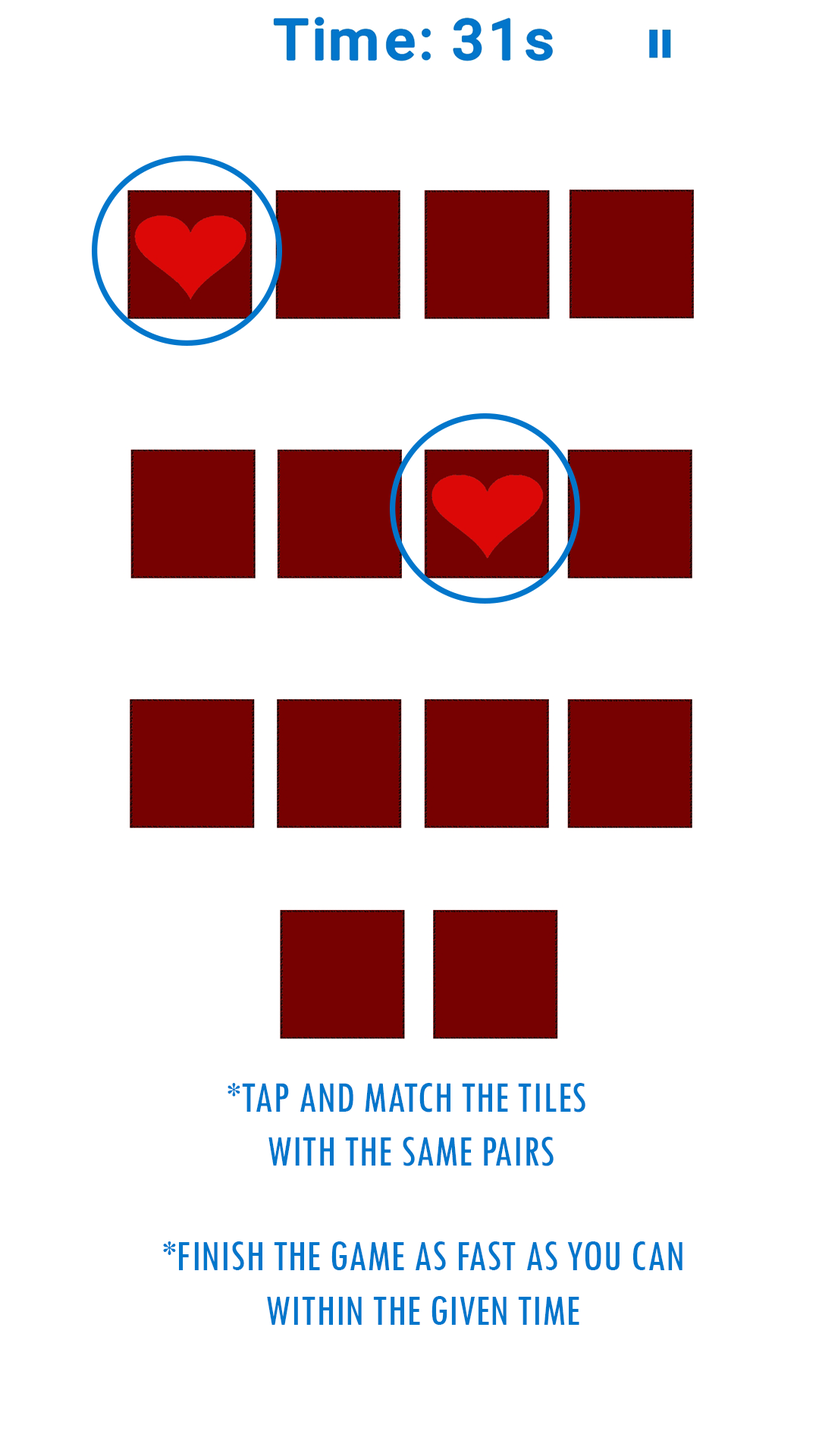
<style>
.page{position:relative;width:819px;height:1456px;background:#ffffff}
.page>*{position:absolute;margin:0}
.t1{font:45.4px "TwCenMT-Condensed";color:#0276cb}
.t2{font:45.5px "TwCenMT-Condensed";color:#0276cb}
</style>
<div class="page">
<p class="t1" style="left:227px;top:1083px;width:358px;height:83px;text-align:center">*TAP AND MATCH THE TILES<br> WITH THE SAME PAIRS</p>
<p class="t2" style="left:163px;top:1241px;width:519px;height:84px;text-align:center">*FINISH THE GAME AS FAST AS YOU CAN<br>WITHIN THE GIVEN TIME</p>
</div>
